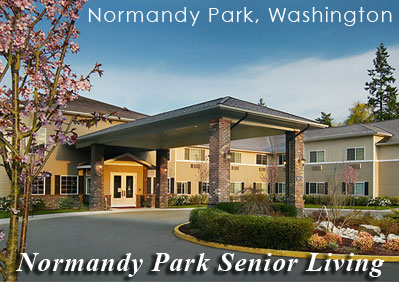
<style>
.page{position:relative;width:399px;height:282px}
.page>*{position:absolute;margin:0}
.t1{font:20.4px "CenturyGothic";letter-spacing:0.05em;color:#ffffff}
.t2{font:26.5px "TimesNewRomanPS-BoldItalicMT";letter-spacing:0.05em;color:#ffffff}
</style>
<div class="page">
<p class="t1" style="left:88px;top:7px;width:304px;height:19px">Normandy Park, Washington</p>
<p class="t2" style="left:16px;top:253px;width:369px;height:24px">Normandy Park Senior Living</p>
</div>
